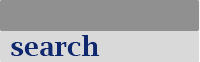
<style>
.page{position:relative;width:200px;height:62px;background:#909090}
.page>*{position:absolute;margin:0}
.t1{font:27px "LucidaBright-Demi";color:#0e276d}
</style>
<div class="page">
<p class="t1" style="left:11px;top:35px;width:89px;height:21px">search</p>
</div>
